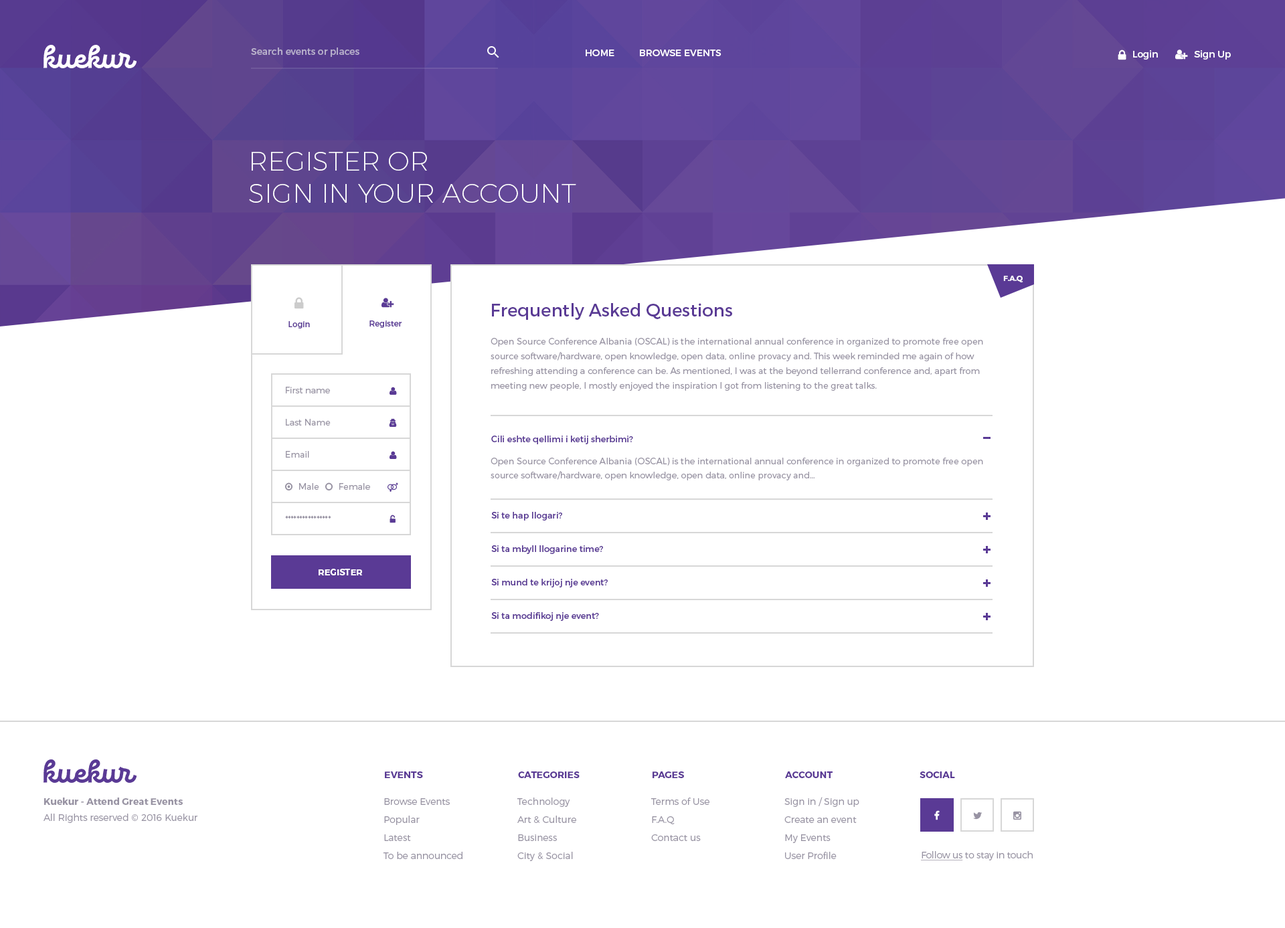
<style>
.page{position:relative;width:1285px;height:928px;background:#ffffff}
.page>*{position:absolute;margin:0}
.t1{font:9.4px "Montserrat-Regular";color:#b7afcb}
.t2{font:9.4px "Montserrat-Regular";color:#ffffff;text-transform:uppercase}
.t3{font:9.4px "Montserrat-Regular";color:#ffffff}
.t4{font:26.8px/32.1px "Montserrat-UltraLight";color:#ffffff;text-transform:uppercase}
.t5{font:7.4px "Montserrat-Bold";color:#fefeff;text-transform:uppercase}
.t6{font:17.4px "Montserrat-Regular";color:#5a3a95}
.t7{font:8px "Montserrat-Regular";color:#5a3a95}
.t8{font:8.7px/14.7px "Montserrat-Light";color:#9893a3}
.t9{font:8.7px "Montserrat-Light";color:#9893a3}
.t10{font:8.7px "Montserrat-Regular";color:#5a3a95}
.t11{font:8.7px/14.1px "Montserrat-Light";color:#9893a3}
.t12{font:8.7px/16.7px "Montserrat-Regular";color:#5a3a95}
.t13{font:8.7px "Montserrat-Bold";color:#ffffff;text-transform:uppercase}
.t14{font:9.4px "Montserrat-Bold";color:#5a3a95;text-transform:uppercase}
.t15{font:9.4px/16.1px "Montserrat-Light";color:#9893a3}
.t16{font:9.4px/16.1px "Montserrat-Bold";color:#9893a3}
.t17{font:9.4px/18.1px "Montserrat-Light";color:#9893a3}
.t18{font:9.4px "Montserrat-Light";letter-spacing:-0.015em;color:#9893a3}
.t19{font:9.4px "Montserrat-Light";letter-spacing:-0.015em;color:#9893a3;text-decoration:underline}
</style>
<div class="page">
<p class="t1" style="left:251px;top:48px;width:108px;height:9px">Search events or places</p>
<p class="t2" style="left:586px;top:50px;width:135px;height:6px">Home          Browse events</p>
<p class="t3" style="left:1133px;top:50px;width:98px;height:10px">Login               Sign Up</p>
<p class="t4" style="left:249px;top:152px;width:327px;height:51px">register or<br>sign in your account</p>
<p class="t5" style="left:1003px;top:276px;width:20px;height:6px">F.a.Q</p>
<p class="t6" style="left:492px;top:303px;width:240px;height:17px">Frequently Asked Questions</p>
<p class="t7" style="left:288px;top:321px;width:22px;height:8px">Login</p>
<p class="t7" style="left:288px;top:321px;width:22px;height:8px">Login</p>
<p class="t7" style="left:369px;top:321px;width:33px;height:7px">Register</p>
<p class="t7" style="left:369px;top:321px;width:33px;height:7px">Register</p>
<p class="t8" style="left:490px;top:338px;width:493px;height:53px">Open Source Conference Albania (OSCAL) is the international annual conference in organized to promote free open source software/hardware, open knowledge, open data, online provacy and. This week reminded me again of how refreshing attending a conference can be. As mentioned, I was at the beyond tellerrand conference and, apart from meeting new people, I mostly enjoyed the inspiration I got from listening to the great talks.</p>
<p class="t9" style="left:286px;top:387px;width:44px;height:6px">First name</p>
<p class="t9" style="left:286px;top:419px;width:45px;height:7px">Last Name</p>
<p class="t10" style="left:491px;top:436px;width:142px;height:8px">Cili eshte qellimi i ketij sherbimi?</p>
<p class="t9" style="left:286px;top:451px;width:23px;height:7px">Email</p>
<p class="t11" style="left:490px;top:458px;width:493px;height:22px">Open Source Conference Albania (OSCAL) is the international annual conference in organized to promote free open source software/hardware, open knowledge, open data, online provacy and...</p>
<p class="t9" style="left:299px;top:483px;width:20px;height:7px">Male</p>
<p class="t9" style="left:339px;top:483px;width:31px;height:7px">Female</p>
<p class="t9" style="left:285px;top:515px;width:46px;height:4px">****************</p>
<p class="t12" style="left:491px;top:512px;width:117px;height:109px">Si te hap llogari?<br><br>Si ta mbyll llogarine time?<br><br>Si mund te krijoj nje event?<br><br>Si ta modifikoj nje event?</p>
<p class="t13" style="left:319px;top:569px;width:44px;height:6px">register</p>
<p class="t14" style="left:385px;top:772px;width:38px;height:6px">Events</p>
<p class="t14" style="left:518px;top:772px;width:61px;height:6px">categories</p>
<p class="t14" style="left:652px;top:772px;width:32px;height:6px">Pages</p>
<p class="t14" style="left:785px;top:772px;width:47px;height:6px">Account</p>
<p class="t14" style="left:919px;top:772px;width:36px;height:6px">social</p>
<p class="t15" style="left:43px;top:798px;width:154px;height:25px"><span class="t16">Kuekur - Attend Great Events<br></span>All Rights reserved © 2016 Kuekur</p>
<p class="t17" style="left:517px;top:798px;width:59px;height:63px">Technology<br>Art &amp; Culture<br>Business<br>City &amp; Social</p>
<p class="t17" style="left:650px;top:798px;width:59px;height:43px">Terms of Use<br>F.A.Q<br>Contact us</p>
<p class="t17" style="left:784px;top:797px;width:75px;height:62px">Sign in / Sign up<br>Create an event<br>My Events<br>User Profile</p>
<p class="t17" style="left:383px;top:798px;width:79px;height:61px">Browse Events<br>Popular<br>Latest<br>To be announced</p>
<p class="t18" style="left:921px;top:851px;width:112px;height:10px"><span class="t19">Follow us</span> to stay in touch</p>
</div>
